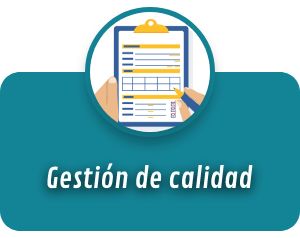
<style>
.page{position:relative;width:300px;height:238px;background:#138496}
.page>*{position:absolute;margin:0}
.t1{font:28px "ContrailOne-Regular";color:#f9feff}
</style>
<div class="page">
<p class="t1" style="left:47px;top:163px;width:206px;height:26px">Gestión de calidad</p>
</div>
